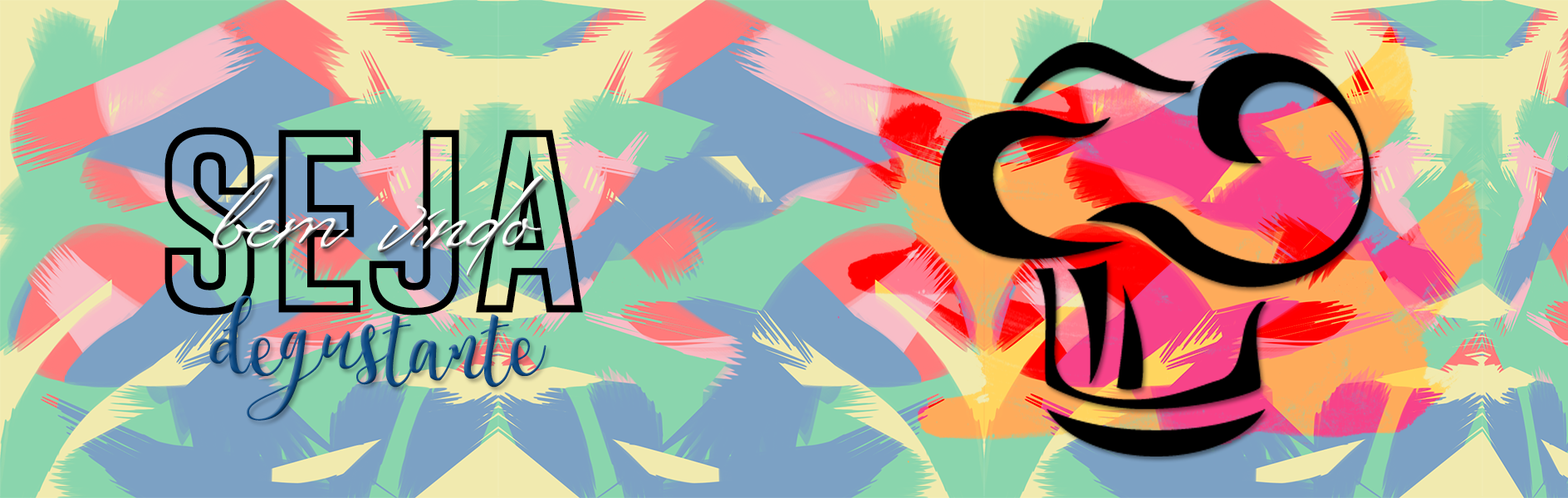
<style>
.page{position:relative;width:1568px;height:498px}
.page>*{position:absolute;margin:0}
.t1{font:207.6px "GoboldHollowBold";color:#000000}
.t2{font:83.1px "SpringTimePersonalUse"}
</style>
<div class="page">
<p class="t1" style="left:164px;top:127px;width:419px;height:189px">seja</p>
<p class="t2" style="left:209px;top:296px;width:337px;height:125px">degustante</p>
</div>
